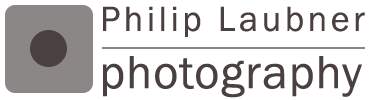
<style>
.page{position:relative;width:380px;height:100px;background:#ffffff}
.page>*{position:absolute;margin:0}
.t1{font:36px "FranklinGothic-Book";letter-spacing:0.1em;color:#4b4040}
.t2{font:48px "FranklinGothic-Book";letter-spacing:0.025em;color:#4b4040}
</style>
<div class="page">
<p class="t1" style="left:103px;top:6px;width:262px;height:31px">Philip Laubner</p>
<p class="t2" style="left:103px;top:56px;width:259px;height:42px">photography</p>
</div>
